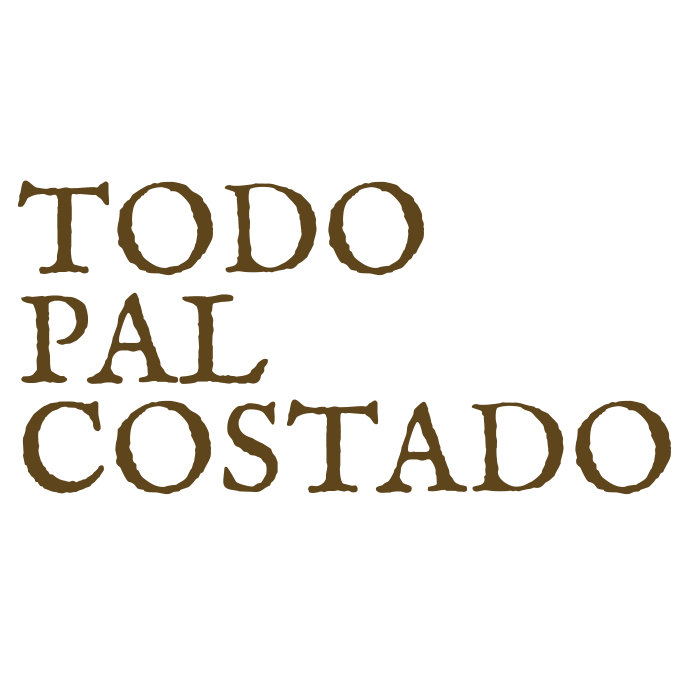
<style>
.page{position:relative;width:695px;height:694px;background:#ffffff}
.page>*{position:absolute;margin:0}
.t1{font:128.1px/109.3px "IM_FELL_English_SC";letter-spacing:0.015em;color:#5e451b}
</style>
<div class="page">
<p class="t1" style="left:17px;top:180px;width:655px;height:315px">TODO<br>PAL<br>COSTADO</p>
</div>
